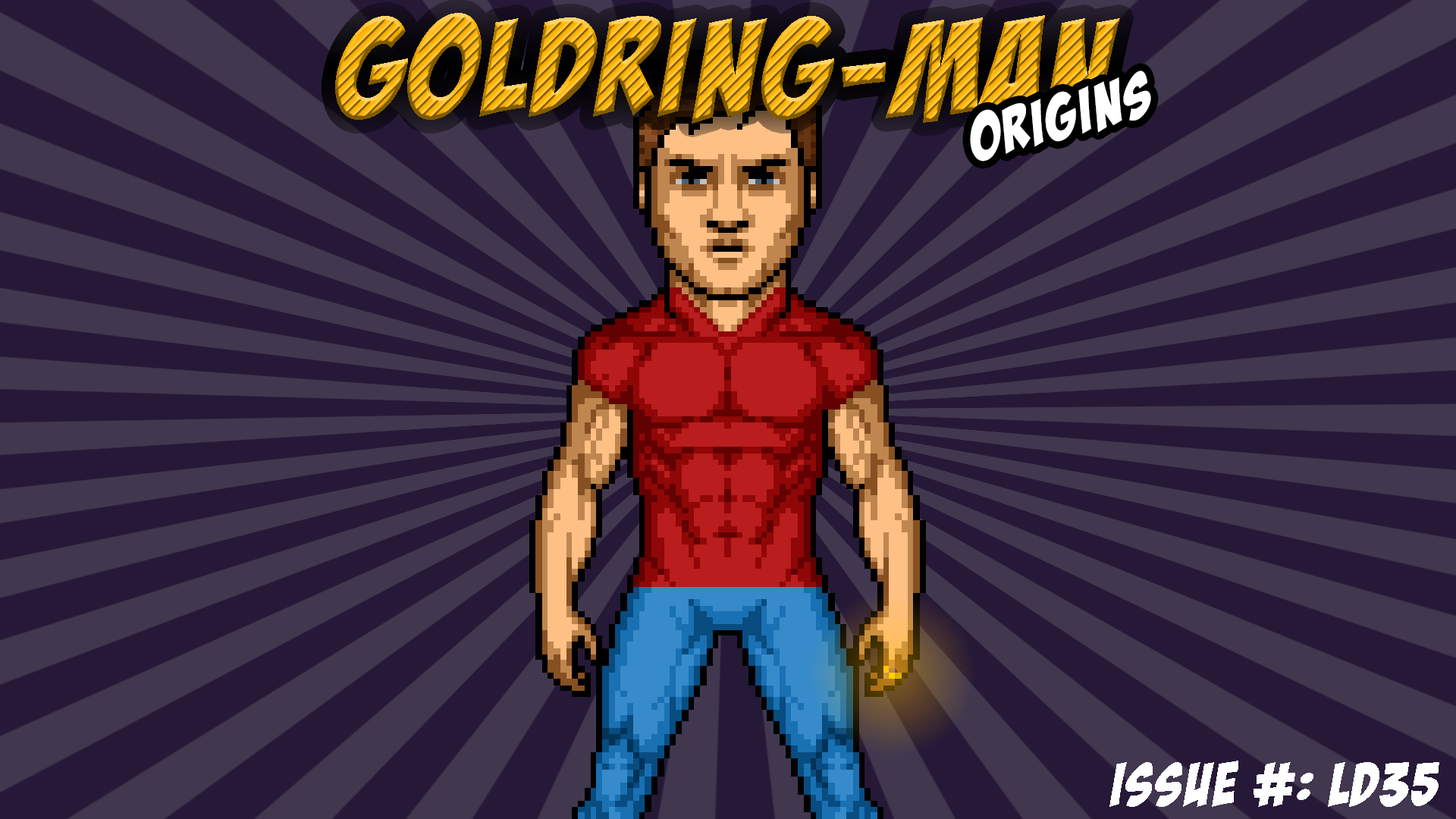
<style>
.page{position:relative;width:1456px;height:819px;background:#41374f}
.page>*{position:absolute;margin:0}
.t1{font:136.5px "BadaBoomBB";letter-spacing:0.05em}
.t2{font:62.2px "BadaBoomBB";letter-spacing:0.05em;color:#ffffff}
.t3{font:60.7px "BadaBoomBB";letter-spacing:0.05em;color:#ffffff}
</style>
<div class="page">
<p class="t1" style="left:335px;top:13px;width:785px;height:111px">GOLDRING-MAN</p>
<p class="t2" style="left:970px;top:71px;width:181px;height:91px;rotate:-15deg">Origins</p>
<p class="t3" style="left:1109px;top:761px;width:330px;height:46px">Issue #: LD35</p>
</div>
